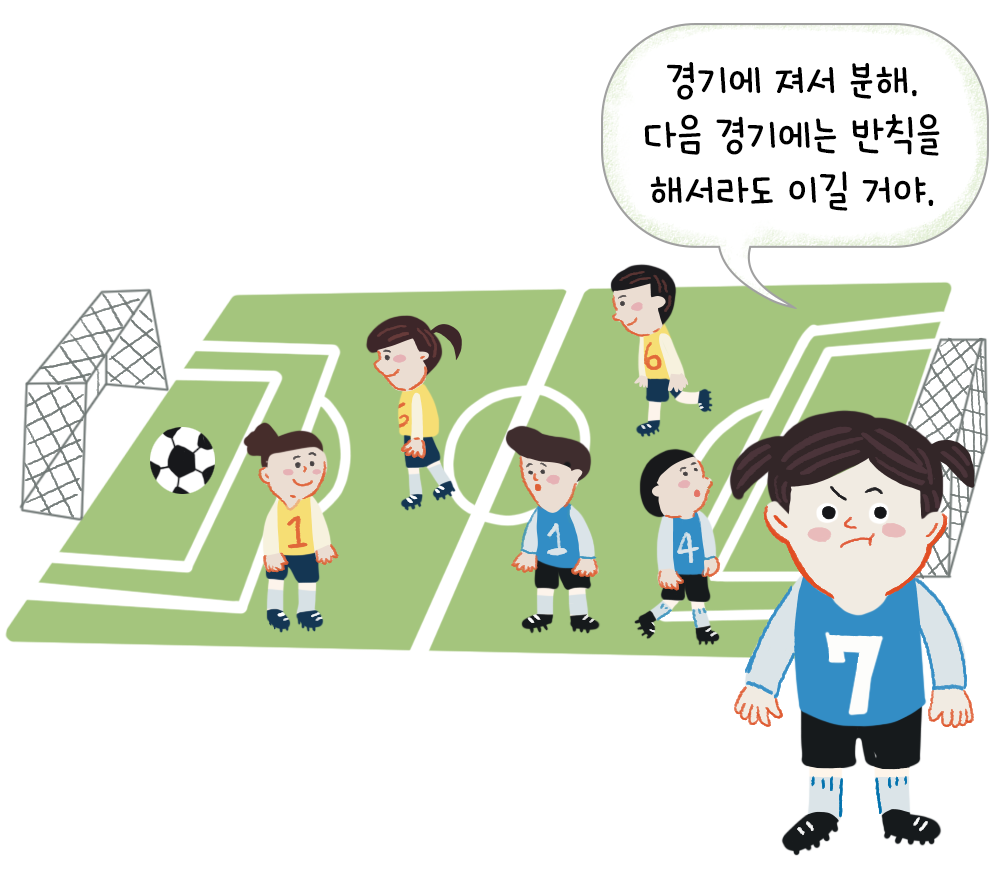
<style>
.page{position:relative;width:1000px;height:880px;background:#ffffff}
.page>*{position:absolute;margin:0}
.t1{font:45.7px "HakgyoansimNadeuriOTF-L";color:#000000}
</style>
<div class="page">
<p class="t1" style="left:644px;top:62px;width:296px;height:149px;text-align:center">경기에 져서 분해.<br>다음 경기에는 반칙을<br>해서라도 이길 거야.</p>
</div>
